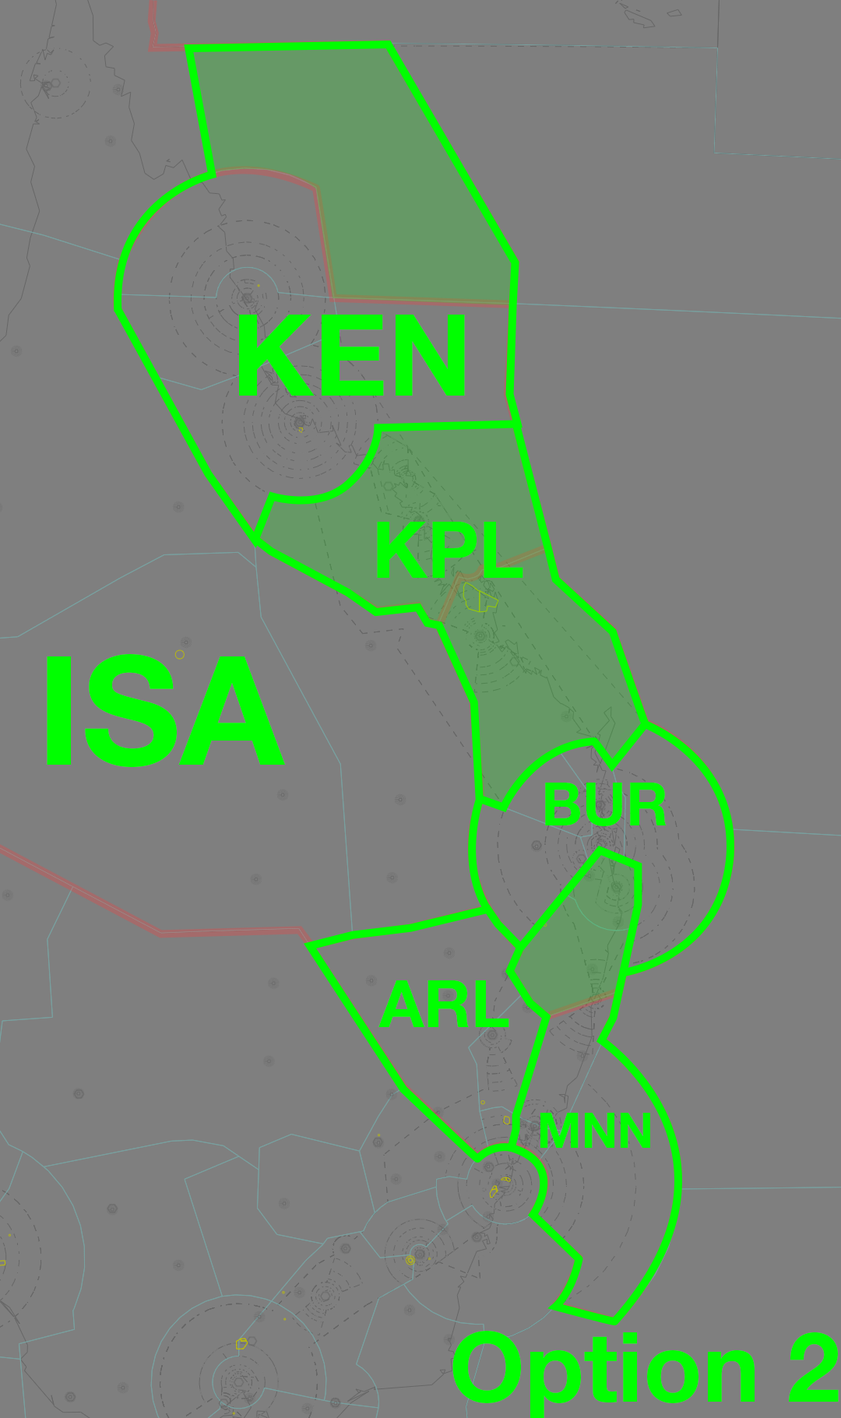
<style>
.page{position:relative;width:841px;height:1418px;background:#7f7f7f}
.page>*{position:absolute;margin:0}
.t1{font:113.7px "HelveticaNeueLTStd-Bd";color:#00ff00}
.t2{font:78px "HelveticaNeueLTStd-Bd";color:#00ff00}
.t3{font:151.6px "HelveticaNeueLTStd-Bd";color:#00ff00}
.t4{font:59.4px "HelveticaNeueLTStd-Bd";color:#00ff00}
.t5{font:65.4px "HelveticaNeueLTStd-Bd";color:#00ff00}
.t6{font:49px "HelveticaNeueLTStd-Bd";color:#00ff00}
.t7{font:96.6px "HelveticaNeueLTStd-Bd";color:#00ff00}
</style>
<div class="page">
<p class="t1" style="left:239px;top:315px;width:226px;height:81px">KEN</p>
<p class="t2" style="left:377px;top:522px;width:146px;height:56px">KPL</p>
<p class="t3" style="left:47px;top:654px;width:238px;height:113px">ISA</p>
<p class="t4" style="left:545px;top:783px;width:122px;height:43px">BUR</p>
<p class="t5" style="left:378px;top:980px;width:131px;height:47px">ARL</p>
<p class="t6" style="left:540px;top:1113px;width:110px;height:35px">MNN</p>
<p class="t7" style="left:452px;top:1331px;width:387px;height:89px">Option 2</p>
</div>
